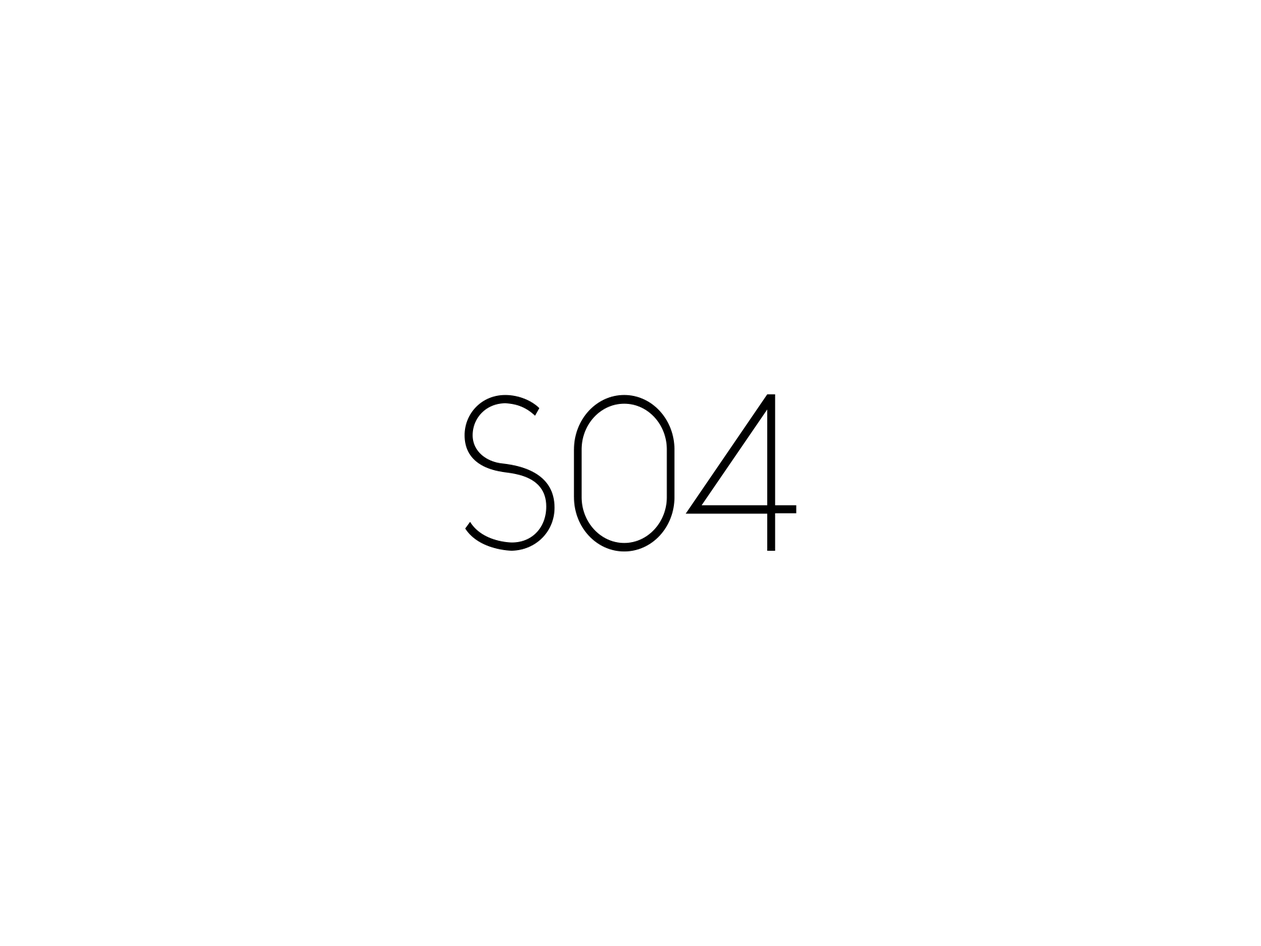
<style>
.page{position:relative;width:1261px;height:946px;background:#ffffff}
.page>*{position:absolute;margin:0}
.t1{font:222.4px "Alcubierre";color:#000000;scale:0.95 1}
</style>
<div class="page">
<p class="t1" style="left:464px;top:394px;width:333px;height:158px">S04</p>
</div>
